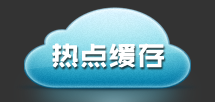
<style>
.page{position:relative;width:215px;height:102px;background:#333333}
.page>*{position:absolute;margin:0}
.t1{font:28px "ZHSCNMT--GBK1-0";color:#ffffff;font-weight:bold}
</style>
<div class="page">
<p class="t1" style="left:52px;top:43px;width:112px;height:25px">热点缓存</p>
</div>
